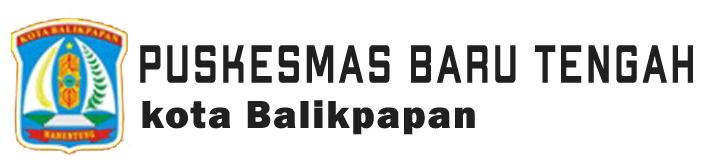
<style>
.page{position:relative;width:707px;height:165px;background:#ffffff}
.page>*{position:absolute;margin:0}
.t1{font:53.3px "ApexMk2-BoldExtended";letter-spacing:0.05em;color:#202020;scale:0.73 1}
.t2{font:40px "FranklinGothic-Heavy";letter-spacing:0.05em;color:#202020}
</style>
<div class="page">
<p class="t1" style="left:140px;top:45px;width:553px;height:38px">Puskesmas Baru Tengah</p>
<p class="t2" style="left:142px;top:100px;width:333px;height:35px">kota Balikpapan</p>
</div>
